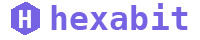
<style>
.page{position:relative;width:200px;height:40px;background:#ffffff}
.page>*{position:absolute;margin:0}
.t1{font:33.3px "Menlo-Bold";color:#7663e4}
.t2{font:25px "Menlo-Bold";color:#ffffff}
</style>
<div class="page">
<p class="t1" style="left:51px;top:3px;width:137px;height:27px">hexabit</p>
<p class="t2" style="left:19px;top:10px;width:12px;height:18px">H</p>
</div>
